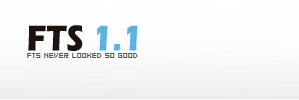
<style>
.page{position:relative;width:299px;height:100px}
.page>*{position:absolute;margin:0}
.t1{font:37.2px "ErasITC-Bold";color:#1b130d;scale:0.85 1}
.t2{font:37.2px "ErasITC-Bold";color:#57b4eb;scale:0.85 1}
.t3{font:8px "04b03b";color:#545555}
</style>
<div class="page">
<p class="t1" style="left:28px;top:25px;width:110px;height:26px">FTS <span class="t2">1.1</span></p>
<p class="t3" style="left:27px;top:53px;width:111px;height:5px">FTS NEVER LOOKED SO GOOD</p>
</div>
